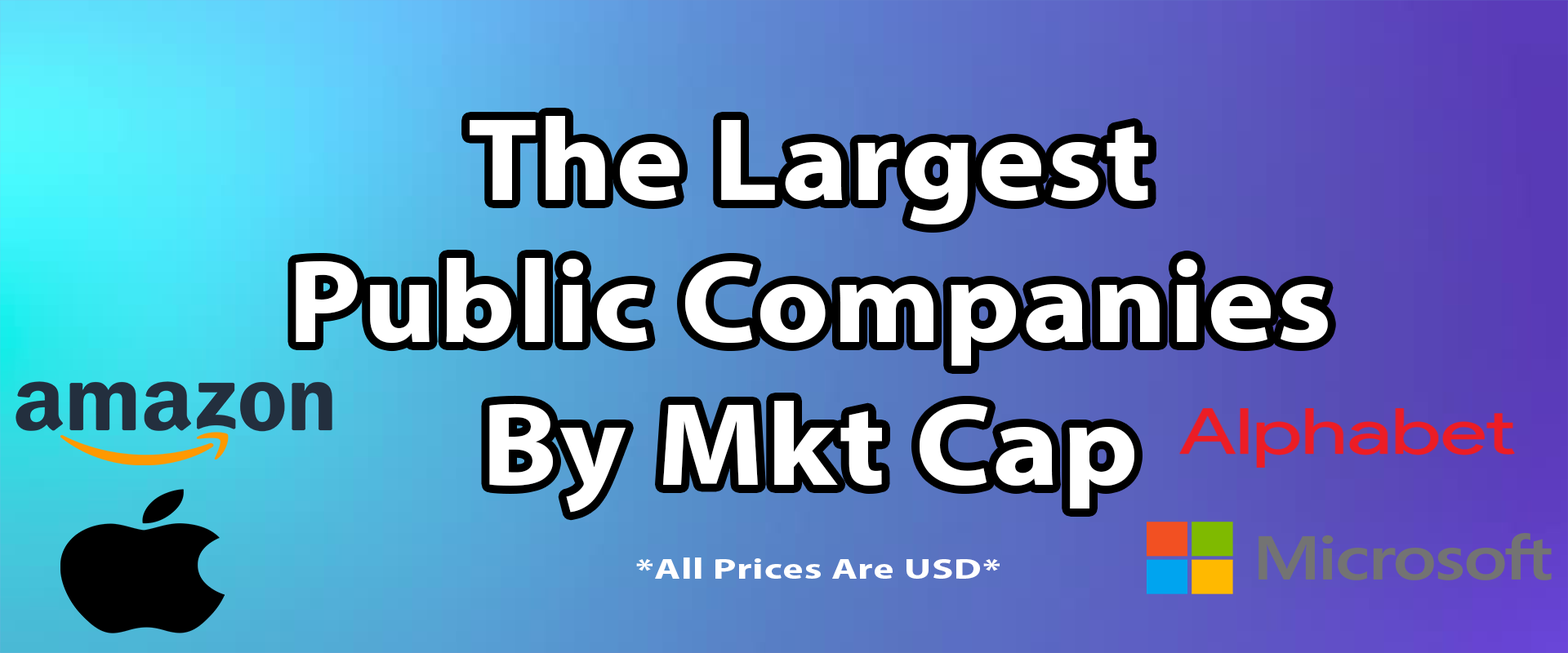
<style>
.page{position:relative;width:1568px;height:653px}
.page>*{position:absolute;margin:0}
.t1{font:118.7px "MyriadPro-Bold";letter-spacing:0.02em;color:#ffffff;scale:1.07 1}
.t2{font:29px "MyriadPro-Bold";letter-spacing:0.02em;color:#ffffff;scale:1.37 1}
</style>
<div class="page">
<p class="t1" style="left:296px;top:116px;width:1032px;height:397px;text-align:center">The Largest<br>Public Companies<br>By Mkt Cap</p>
<p class="t2" style="left:636px;top:558px;width:364px;height:21px">*All Prices Are USD*</p>
</div>
